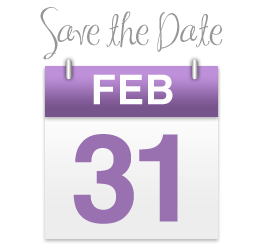
<style>
.page{position:relative;width:263px;height:247px;background:#ffffff}
.page>*{position:absolute;margin:0}
.t1{font:31.5px "MASexy";color:#969696}
.t2{font:41.1px "Helvetica-Bold";color:#fefefe;text-transform:uppercase}
.t3{font:122.4px "Helvetica-Bold";color:#9970b0;text-transform:uppercase}
</style>
<div class="page">
<p class="t1" style="left:40px;top:7px;width:183px;height:53px">Save the Date</p>
<p class="t2" style="left:93px;top:74px;width:80px;height:31px">FEB</p>
<p class="t3" style="left:73px;top:134px;width:105px;height:90px">31</p>
</div>
